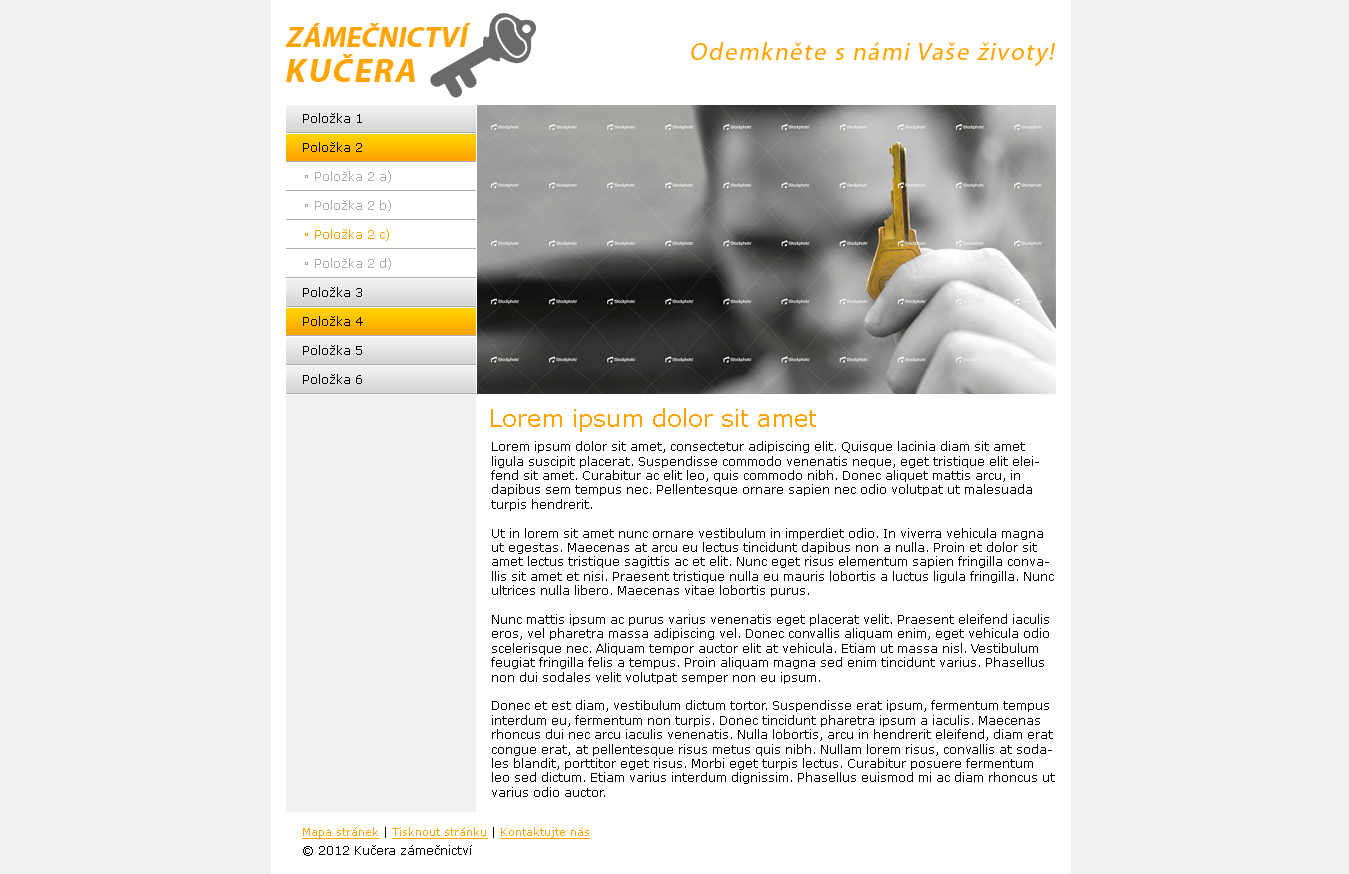
<style>
.page{position:relative;width:1349px;height:874px;background:#f3f0f1}
.page>*{position:absolute;margin:0}
.t1{font:28.7px "MyriadPro-Bold";color:#ffa300;font-style:italic}
.t2{font:33.1px "MyriadPro-Bold";letter-spacing:0.06em;color:#ffa300;font-style:italic}
.t3{font:25px "MyriadPro-Regular";letter-spacing:0.06em;color:#ffa300;font-style:italic}
.t4{font:12px "Verdana";color:#000000}
.t5{font:12px "Verdana";color:#ababab}
.t6{font:12px "Verdana";color:#ffa300}
.t7{font:24px "Verdana";color:#ffa300}
.t8{font:11px "Verdana";color:#ffa300;text-decoration:underline}
.t9{font:11px "Verdana";color:#000000}
</style>
<div class="page">
<p class="t1" style="left:285px;top:23px;width:187px;height:24px">ZÁMEČNICTVÍ</p>
<p class="t2" style="left:286px;top:54px;width:129px;height:28px">KUČERA</p>
<p class="t3" style="left:691px;top:42px;width:364px;height:24px">Odemkněte s námi Vaše životy!</p>
<p class="t4" style="left:303px;top:113px;width:59px;height:10px">Položka 1</p>
<p class="t4" style="left:303px;top:142px;width:59px;height:10px">Položka 2</p>
<p class="t5" style="left:315px;top:171px;width:76px;height:12px">Položka 2 a)</p>
<p class="t5" style="left:315px;top:200px;width:76px;height:12px">Položka 2 b)</p>
<p class="t6" style="left:315px;top:229px;width:74px;height:12px">Položka 2 c)</p>
<p class="t5" style="left:315px;top:258px;width:76px;height:12px">Položka 2 d)</p>
<p class="t4" style="left:303px;top:287px;width:59px;height:10px">Položka 3</p>
<p class="t4" style="left:303px;top:316px;width:60px;height:10px">Položka 4</p>
<p class="t4" style="left:303px;top:345px;width:59px;height:10px">Položka 5</p>
<p class="t4" style="left:303px;top:374px;width:59px;height:10px">Položka 6</p>
<p class="t7" style="left:491px;top:408px;width:325px;height:24px">Lorem ipsum dolor sit amet</p>
<p class="t4" style="left:491px;top:441px;width:564px;height:356px">Lorem ipsum dolor sit amet, consectetur adipiscing elit. Quisque lacinia diam sit amet ligula suscipit placerat. Suspendisse commodo venenatis neque, eget tristique elit eleifend sit amet. Curabitur ac elit leo, quis commodo nibh. Donec aliquet mattis arcu, in dapibus sem tempus nec. Pellentesque ornare sapien nec odio volutpat ut malesuada turpis hendrerit.<br><br>Ut in lorem sit amet nunc ornare vestibulum in imperdiet odio. In viverra vehicula magna ut egestas. Maecenas at arcu eu lectus tincidunt dapibus non a nulla. Proin et dolor sit amet lectus tristique sagittis ac et elit. Nunc eget risus elementum sapien fringilla convallis sit amet et nisi. Praesent tristique nulla eu mauris lobortis a luctus ligula fringilla. Nunc ultrices nulla libero. Maecenas vitae lobortis purus.<br><br>Nunc mattis ipsum ac purus varius venenatis eget placerat velit. Praesent eleifend iaculis eros, vel pharetra massa adipiscing vel. Donec convallis aliquam enim, eget vehicula odio scelerisque nec. Aliquam tempor auctor elit at vehicula. Etiam ut massa nisl. Vestibulum feugiat fringilla felis a tempus. Proin aliquam magna sed enim tincidunt varius. Phasellus non dui sodales velit volutpat semper non eu ipsum.<br><br>Donec et est diam, vestibulum dictum tortor. Suspendisse erat ipsum, fermentum tempus interdum eu, fermentum non turpis. Donec tincidunt pharetra ipsum a iaculis. Maecenas rhoncus dui nec arcu iaculis venenatis. Nulla lobortis, arcu in hendrerit eleifend, diam erat congue erat, at pellentesque risus metus quis nibh. Nullam lorem risus, convallis at sodales blandit, porttitor eget risus. Morbi eget turpis lectus. Curabitur posuere fermentum leo sed dictum. Etiam varius interdum dignissim. Phasellus euismod mi ac diam rhoncus ut varius odio auctor.<br><br>Donec sit amet libero vel ante pulvinar tristique. In eget odio libero. Proin ultricies tempus lobortis. Etiam porttitor tincidunt sagittis. Nunc elementum aliquam risus, non tincidunt odio blandit blandit. Sed accumsan viverra venenatis. Nullam a diam nec risus semper pulvinar. Mauris odio lectus, venenatis sed fermentum at, laoreet eu mi.</p>
<p class="t8" style="left:302px;top:827px;width:288px;height:12px">Mapa stránek<span class="t9"> | </span>Tisknout stránku<span class="t9"> | </span>Kontaktujte nás</p>
<p class="t4" style="left:303px;top:845px;width:169px;height:11px">© 2012 Kučera zámečnictví</p>
</div>
